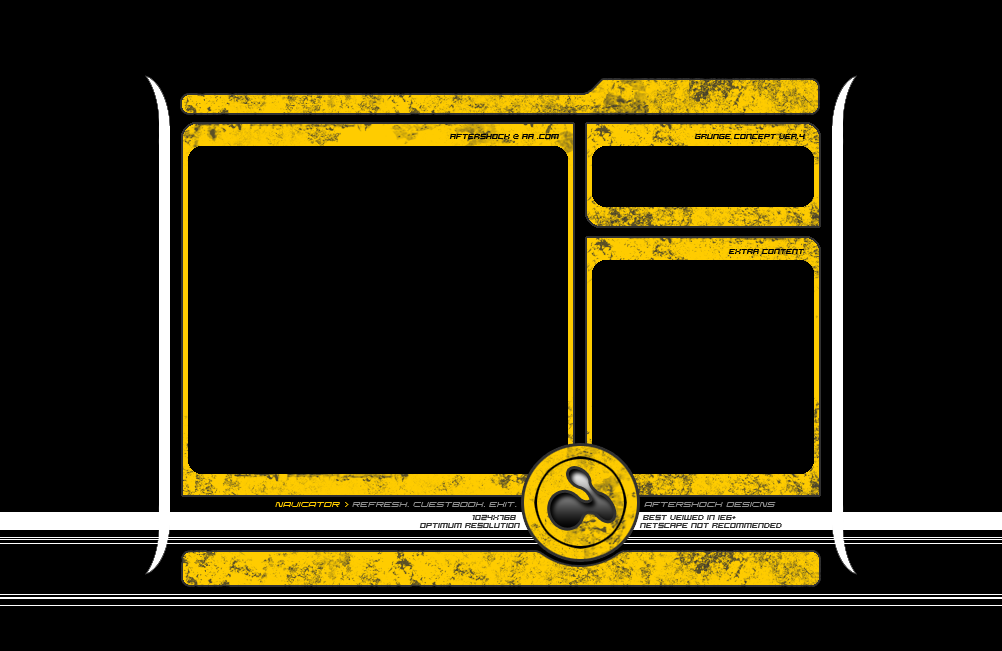
<style>
.page{position:relative;width:1002px;height:651px;background:#000000}
.page>*{position:absolute;margin:0}
.t1{font:8px "Hooge0553";color:#000000;text-transform:uppercase;font-style:italic}
.t2{font:10px "DominatorThinItalic";color:#8e8e8e;text-transform:uppercase}
.t3{font:10px "DominatorThinItalic";color:#ffcc00;text-transform:uppercase}
.t4{font:10px "AuXDotBitC";color:#ffcc00;text-transform:uppercase}
.t5{font:8px "Hooge0553";color:#313131;text-transform:uppercase;font-style:italic}
</style>
<div class="page">
<p class="t1" style="left:449px;top:133px;width:110px;height:7px">after5hock @ aa .com</p>
<p class="t1" style="left:694px;top:134px;width:111px;height:5px">Grunge concept ver.4</p>
<p class="t1" style="left:728px;top:249px;width:76px;height:5px">Extra content</p>
<p class="t2" style="left:275px;top:502px;width:242px;height:5px"><span class="t3">Navigator </span><span class="t4">&gt; </span>Refresh. Guestbook. Exit.</p>
<p class="t2" style="left:644px;top:502px;width:132px;height:5px">After5hock designs</p>
<p class="t5" style="left:472px;top:514px;width:44px;height:7px">1024x768</p>
<p class="t5" style="left:642px;top:514px;width:94px;height:7px">Best veiwed in ie6+</p>
<p class="t5" style="left:419px;top:522px;width:101px;height:7px">optimum resolution</p>
<p class="t5" style="left:639px;top:522px;width:143px;height:7px">netscape not recommended</p>
</div>
